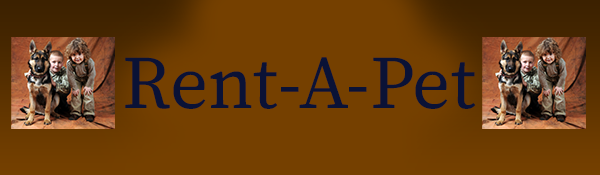
<style>
.page{position:relative;width:600px;height:175px;background:#754000}
.page>*{position:absolute;margin:0}
.t1{font:75px "SourceSerif4Variable-Roman";color:#0a1236}
</style>
<div class="page">
<p class="t1" style="left:125px;top:57px;width:351px;height:52px">Rent-A-Pet</p>
</div>
